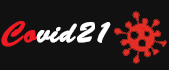
<style>
.page{position:relative;width:169px;height:70px;background:#111111}
.page>*{position:absolute;margin:0}
.t1{font:30px "BrushScriptStd";color:#ffffff;font-weight:bold}
.t2{font:30px "BrushScriptStd";color:#ed1c24;font-weight:bold}
</style>
<div class="page">
<p class="t1" style="left:1px;top:21px;width:110px;height:26px"><span class="t2">Co</span>vid21</p>
</div>
